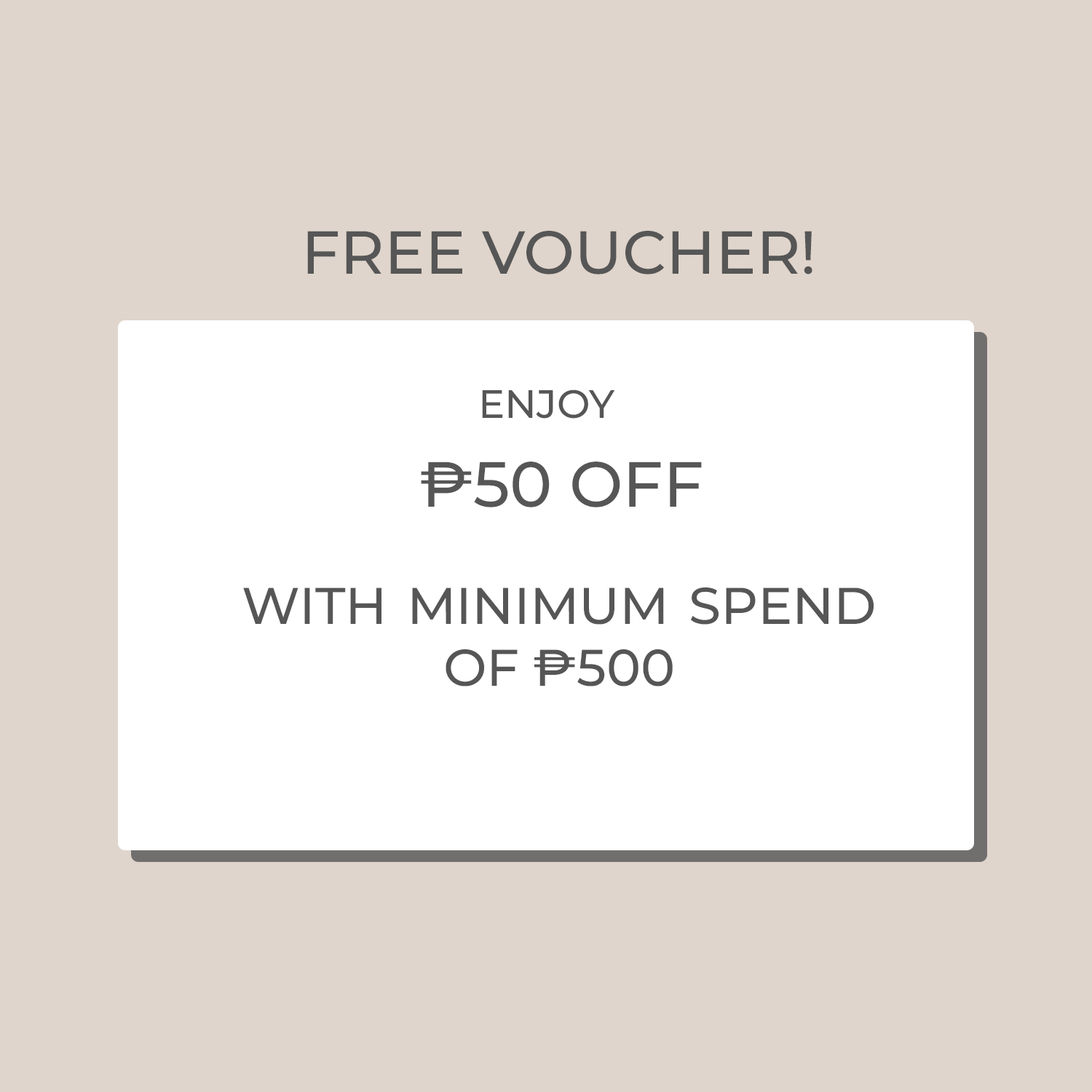
<style>
.page{position:relative;width:1092px;height:1092px;background:#dfd5cc}
.page>*{position:absolute;margin:0}
.t1{font:60.7px "Montserrat-Medium";color:#565656}
.t2{font:39.4px "Montserrat-Medium";color:#565656}
.t3{font:63.7px "Montserrat-Medium";color:#565656}
.t4{font:51.6px "Montserrat-Medium";color:#565656}
</style>
<div class="page">
<p class="t1" style="left:307px;top:231px;width:505px;height:43px">FREE VOUCHER!</p>
<p class="t2" style="left:482px;top:389px;width:133px;height:30px">ENJOY</p>
<p class="t3" style="left:421px;top:462px;width:281px;height:45px">₱50 OFF</p>
<p class="t4" style="left:243px;top:587px;width:631px;height:99px;text-align:justify">WITH MINIMUM SPEND OF ₱500</p>
</div>
